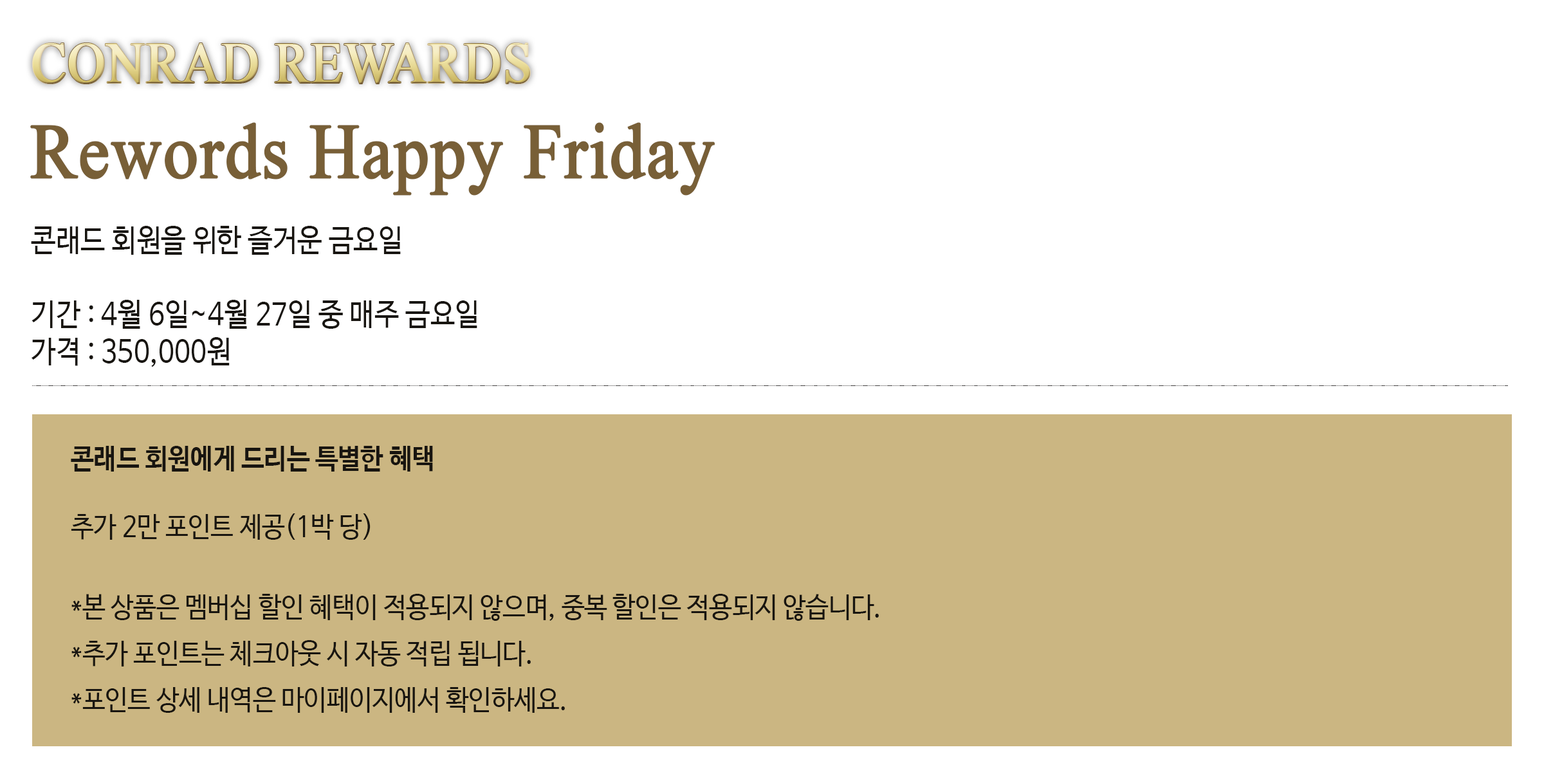
<style>
.page{position:relative;width:1544px;height:772px;background:#ffffff}
.page>*{position:absolute;margin:0}
.t1{font:57.9px "TimesNewRomanPSMT";font-weight:bold;scale:0.9 1}
.t2{font:77.2px "TimesNewRomanPSMT";color:#785f37;font-weight:bold;scale:0.9 1}
.t3{font:30.9px "NanumBarunGothic";color:#181510;scale:0.9 1}
.t4{font:28.3px/46.3px "NanumBarunGothic";color:#181510;scale:0.9 1}
.t5{font:28.3px "NanumBarunGothicBold";color:#181510;scale:0.9 1}
.t6{font:28.3px "NanumBarunGothic";color:#181510;scale:0.9 1}
</style>
<div class="page">
<p class="t1" style="left:32px;top:43px;width:498px;height:41px">CONRAD REWARDS</p>
<p class="t2" style="left:30px;top:122px;width:685px;height:74px">Rewords Happy Friday</p>
<p class="t3" style="left:31px;top:226px;width:446px;height:141px">콘래드 회원을 위한 즐거운 금요일<br><br>기간 : 4월 6일~4월 27일 중 매주 금요일<br>가격 : 350,000원</p>
<p class="t4" style="left:71px;top:446px;width:808px;height:267px"><span class="t5">콘래드 회원에게 드리는 특별한 혜택<br></span><span class="t6"><br>추가 2만 포인트 제공(1박 당)<br><br></span>*본 상품은 멤버십 할인 혜택이 적용되지 않으며, 중복 할인은 적용되지 않습니다.<br>*추가 포인트는 체크아웃 시 자동 적립 됩니다.<br>*포인트 상세 내역은 마이페이지에서 확인하세요.</p>
</div>
